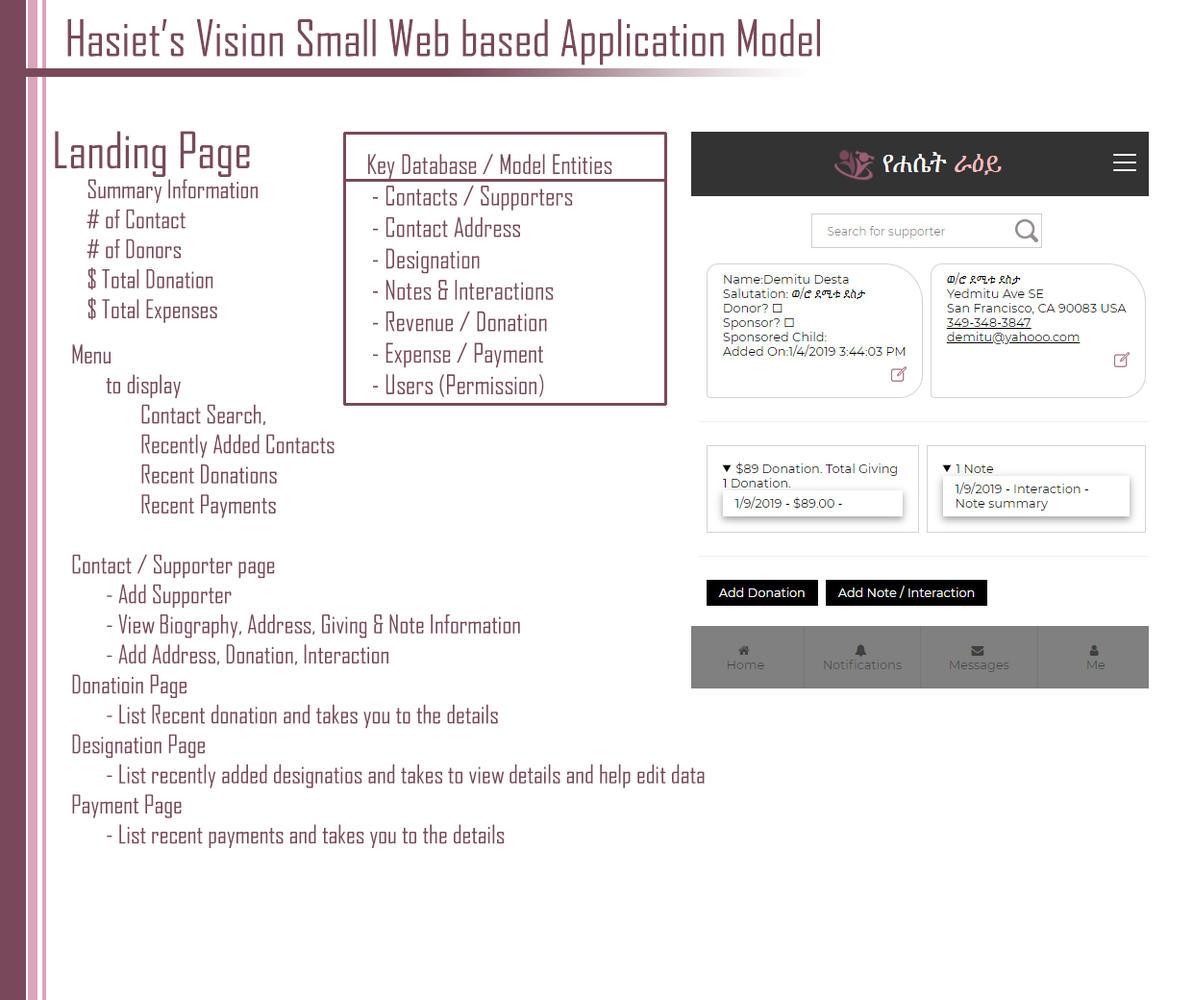
<style>
.page{position:relative;width:1193px;height:1000px;background:#ffffff}
.page>*{position:absolute;margin:0}
.t1{font:48.3px "AgencyFB-Reg";color:#79495b}
.t2{font:25px "AgencyFB-Reg";color:#79495b}
.t3{font:26.2px "AgencyFB-Reg";color:#79495b}
</style>
<div class="page">
<p class="t1" style="left:67px;top:19px;width:753px;height:46px">Hasiet’s Vision Small Web based Application Model</p>
<p class="t2" style="left:55px;top:131px;width:203px;height:192px"><span class="t1">Landing Page<br></span> Summary Information<br> # of Contact<br> # of Donors<br> $ Total Donation<br> $ Total Expenses</p>
<p class="t3" style="left:368px;top:154px;width:244px;height:243px">Key Database / Model Entities<br> - Contacts / Supporters<br> - Contact Address<br> - Designation<br> - Notes &amp; Interactions<br> - Revenue / Donation<br> - Expense / Payment <br> - Users (Permission)</p>
<p class="t2" style="left:72px;top:344px;width:633px;height:504px">Menu <br> to display <br>  Contact Search,<br>  Recently Added Contacts <br>  Recent Donations<br>  Recent Payments<br><br>Contact / Supporter page<br> - Add Supporter <br> - View Biography, Address, Giving &amp; Note Information<br> - Add Address, Donation, Interaction<br>Donatioin Page<br> - List Recent donation and takes you to the details<br>Designation Page<br> - List recently added designatios and takes to view details and help edit data<br>Payment Page<br> - List recent payments and takes you to the details</p>
</div>
